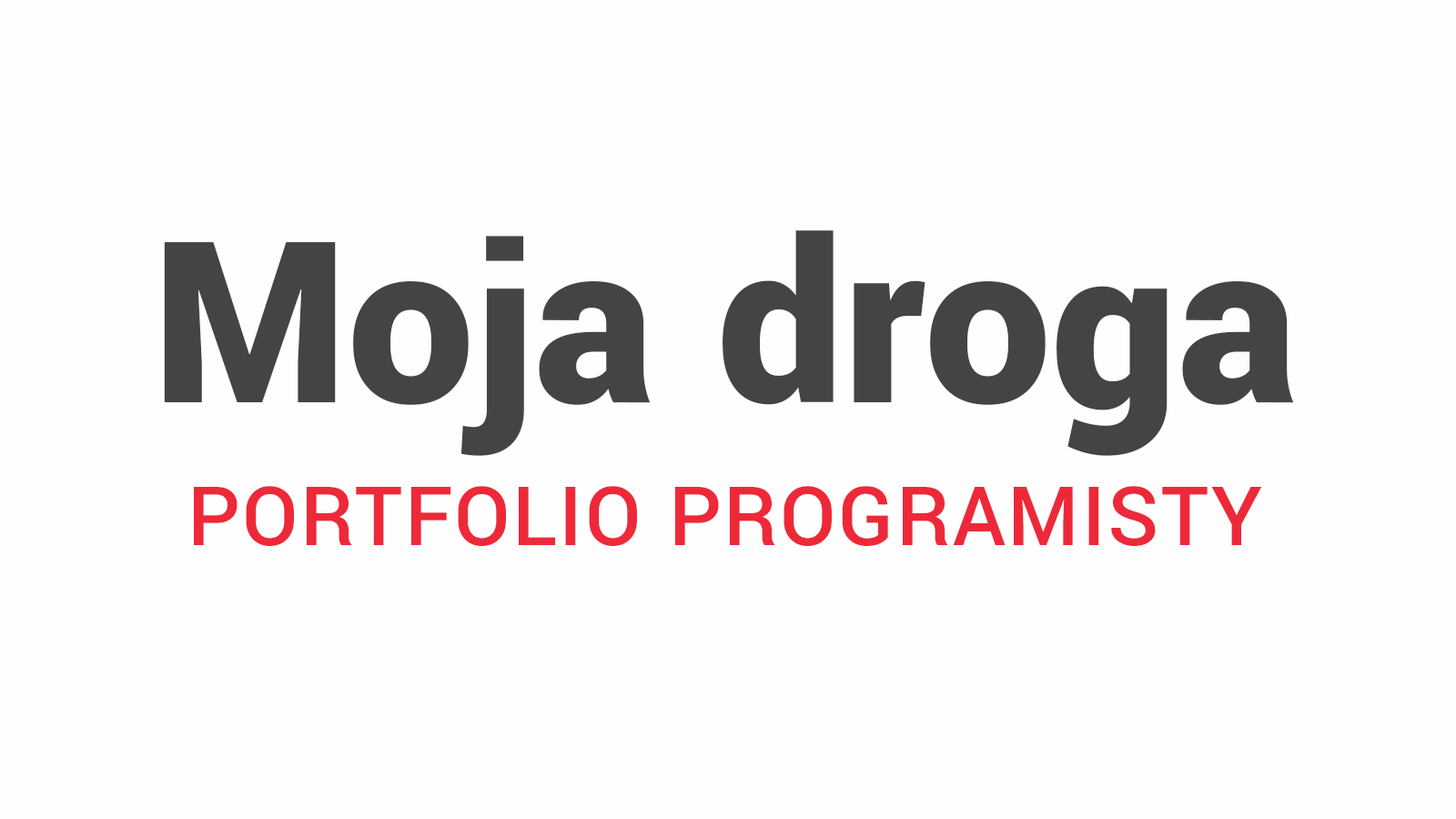
<style>
.page{position:relative;width:1456px;height:819px;background:#fefefe}
.page>*{position:absolute;margin:0}
.t1{font:250.2px "Yantramanav-Black";color:#444444}
.t2{font:91px "Yantramanav-Medium";letter-spacing:0.025em;color:#ed2939}
</style>
<div class="page">
<p class="t1" style="left:164px;top:230px;width:1130px;height:226px">Moja droga</p>
<p class="t2" style="left:194px;top:486px;width:1068px;height:60px">PORTFOLIO PROGRAMISTY</p>
</div>
